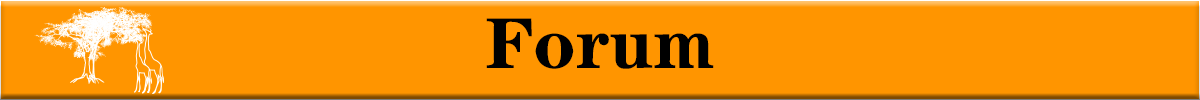
<style>
.page{position:relative;width:1200px;height:100px;background:#ff9500}
.page>*{position:absolute;margin:0}
.t1{font:72px "FZCHSJW--GB1-0";color:#000000}
</style>
<div class="page">
<p class="t1" style="left:486px;top:18px;width:228px;height:51px">Forum</p>
</div>
